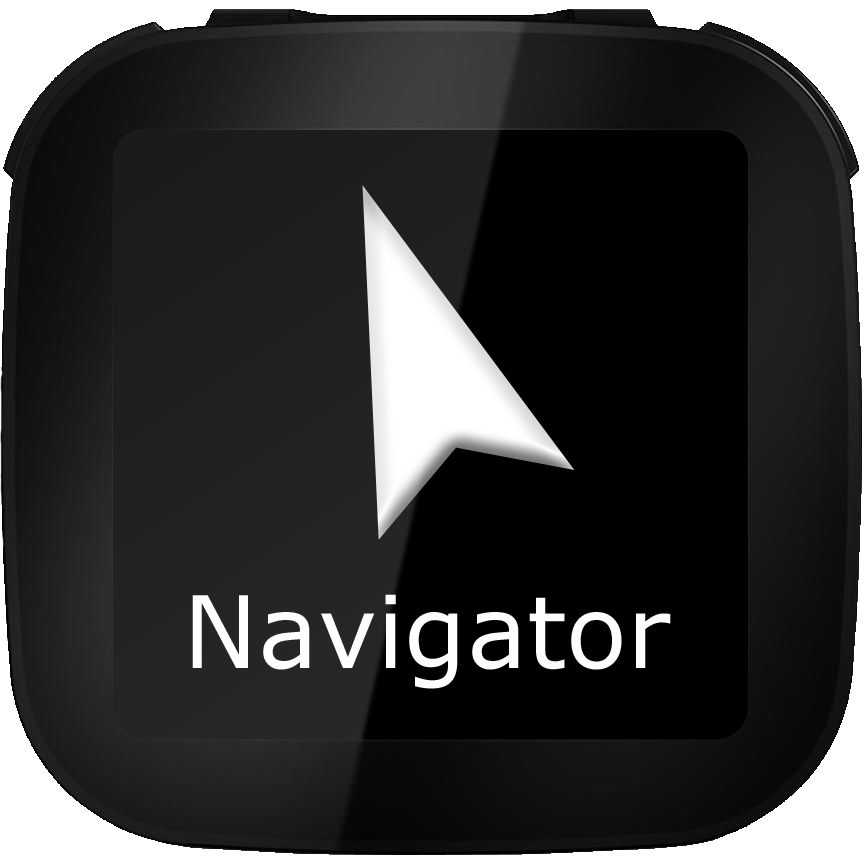
<style>
.page{position:relative;width:864px;height:864px;background:#000000}
.page>*{position:absolute;margin:0}
.t1{font:100px "Verdana";color:#fefefe}
</style>
<div class="page">
<p class="t1" style="left:192px;top:594px;width:479px;height:95px">Navigator</p>
</div>
